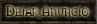
<style>
.page{position:relative;width:97px;height:24px}
.page>*{position:absolute;margin:0}
.t1{font:13.3px "Morpheus"}
</style>
<div class="page">
<p class="t1" style="left:5px;top:6px;width:84px;height:12px">Dejar Anuncio</p>
</div>
